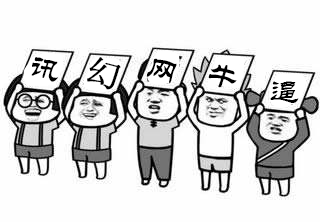
<style>
.page{position:relative;width:320px;height:222px;background:#fefefe}
.page>*{position:absolute;margin:0}
.t1{font:32px "STLiti";letter-spacing:0.03em;color:#000000}
.t2{font:32px "SimSun";letter-spacing:0.03em;color:#000000;font-weight:bold}
</style>
<div class="page">
<p class="t1" style="left:31px;top:57px;width:27px;height:25px;rotate:15deg">讯</p>
<p class="t2" style="left:87px;top:57px;width:34px;height:33px;rotate:15deg">幻</p>
<p class="t1" style="left:146px;top:58px;width:31px;height:26px;rotate:15deg">网</p>
<p class="t1" style="left:208px;top:64px;width:29px;height:24px;rotate:15deg">牛</p>
<p class="t1" style="left:270px;top:81px;width:29px;height:22px">逼</p>
</div>
